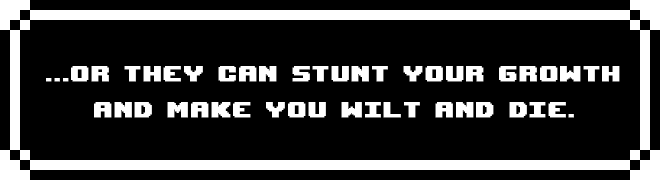
<style>
.page{position:relative;width:660px;height:180px;background:#000000}
.page>*{position:absolute;margin:0}
.t1{font:30px "UpheavalTT-BRK-";letter-spacing:0.05em;color:#ffffff;font-weight:bold}
</style>
<div class="page">
<p class="t1" style="left:46px;top:66px;width:574px;height:52px;text-align:center">...or they can stunt your growth <br>and make you wilt and die.</p>
</div>
